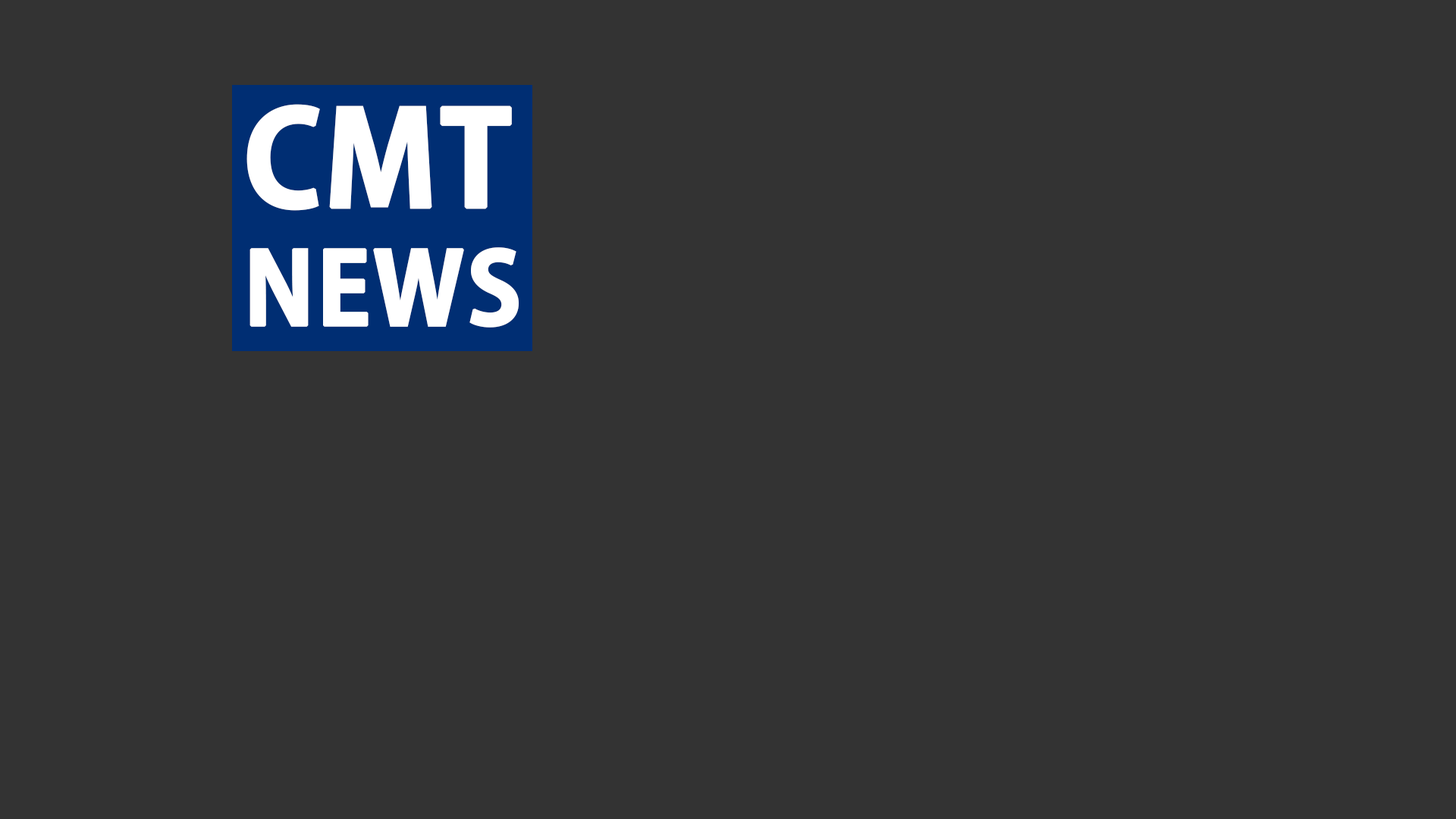
<style>
.page{position:relative;width:1456px;height:819px;background:#333333}
.page>*{position:absolute;margin:0}
.t1{font:98.6px "AdobeGothicStd-Bold";color:#ffffff;font-weight:bold}
.t2{font:128.9px "AdobeGothicStd-Bold";color:#ffffff;font-weight:bold}
</style>
<div class="page">
<p class="t1" style="left:246px;top:104px;width:273px;height:224px"><span class="t2">CMT<br></span>NEWS</p>
</div>
